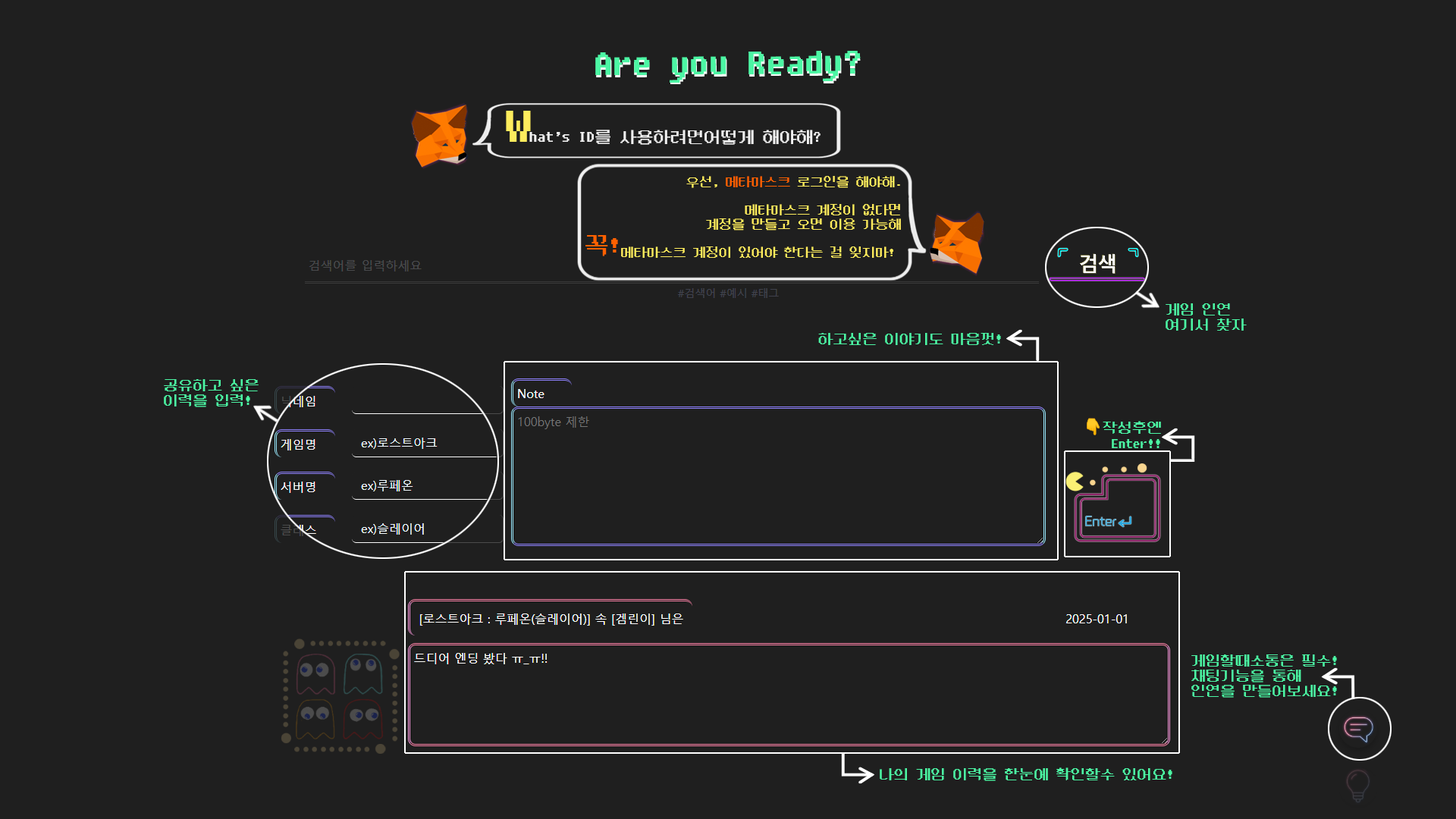
<style>
.page{position:relative;width:1456px;height:819px;background:#1f1f1f}
.page>*{position:absolute;margin:0}
.t1{font:40.4px "DungGeunMo";letter-spacing:-0.025em;color:#4cf6a4}
.t2{font:40.4px "DungGeunMo";letter-spacing:-0.025em}
.t3{font:17.3px "DungGeunMo";letter-spacing:-0.025em;color:#f1f1f1}
.t4{font:55.1px "DungGeunMo";letter-spacing:-0.025em;color:#feec5d}
.t5{font:13.8px/14px "DungGeunMo";letter-spacing:-0.025em;color:#feec5d}
.t6{font:13.8px/14px "DungGeunMo";letter-spacing:-0.025em;color:#ff6100}
.t7{font:25.2px "DungGeunMo";letter-spacing:-0.025em;color:#ff6100}
.t8{font:15.2px/15.4px "DungGeunMo";letter-spacing:-0.025em;color:#4cf6a4}
.t9{font:15.2px "DungGeunMo";letter-spacing:-0.025em;color:#4cf6a4}
.t10{font:15.2px/15.9px "DungGeunMo";letter-spacing:-0.025em;color:#4cf6a4}
.t11{font:15.2px/15.9px "NotoColorEmoji-SVG";letter-spacing:-0.025em;color:#4cf6a4}
</style>
<div class="page">
<p class="t1" style="left:595px;top:51px;width:266px;height:32px">Are you Ready?</p>
<p class="t2" style="left:596px;top:53px;width:265px;height:31px">Are you Ready?</p>
<p class="t3" style="left:506px;top:111px;width:315px;height:34px"><span class="t4">W</span>hat’s ID를 사용하려면어떻게 해야해?</p>
<p class="t5" style="left:621px;top:176px;width:280px;height:82px;text-align:right">우선, <span class="t6">메타마스크</span> 로그인을 해야해.<br><br>메타마스크 계정이 없다면<br>계정을 만들고 오면 이용 가능해<br><br>메타마스크 계정이 있어야 한다는 걸 잊지마!</p>
<p class="t7" style="left:585px;top:235px;width:33px;height:21px">꼭!</p>
<p class="t8" style="left:1166px;top:303px;width:81px;height:28px">게임 인연 <br>여기서 찾자</p>
<p class="t9" style="left:818px;top:333px;width:183px;height:12px">하고싶은 이야기도 마음껏!</p>
<p class="t8" style="left:164px;top:379px;width:95px;height:28px">공유하고 싶은 <br>이력을 입력!</p>
<p class="t10" style="left:1087px;top:418px;width:74px;height:30px;text-align:right"><span class="t11">👇</span>작성후엔<br> Enter!!</p>
<p class="t8" style="left:1191px;top:654px;width:146px;height:44px">게임할때소통은 필수! <br>채팅기능을 통해 <br>인연을 만들어보세요!</p>
<p class="t9" style="left:880px;top:767px;width:292px;height:14px">나의 게임 이력을 한눈에 확인할수 있어요!</p>
</div>
